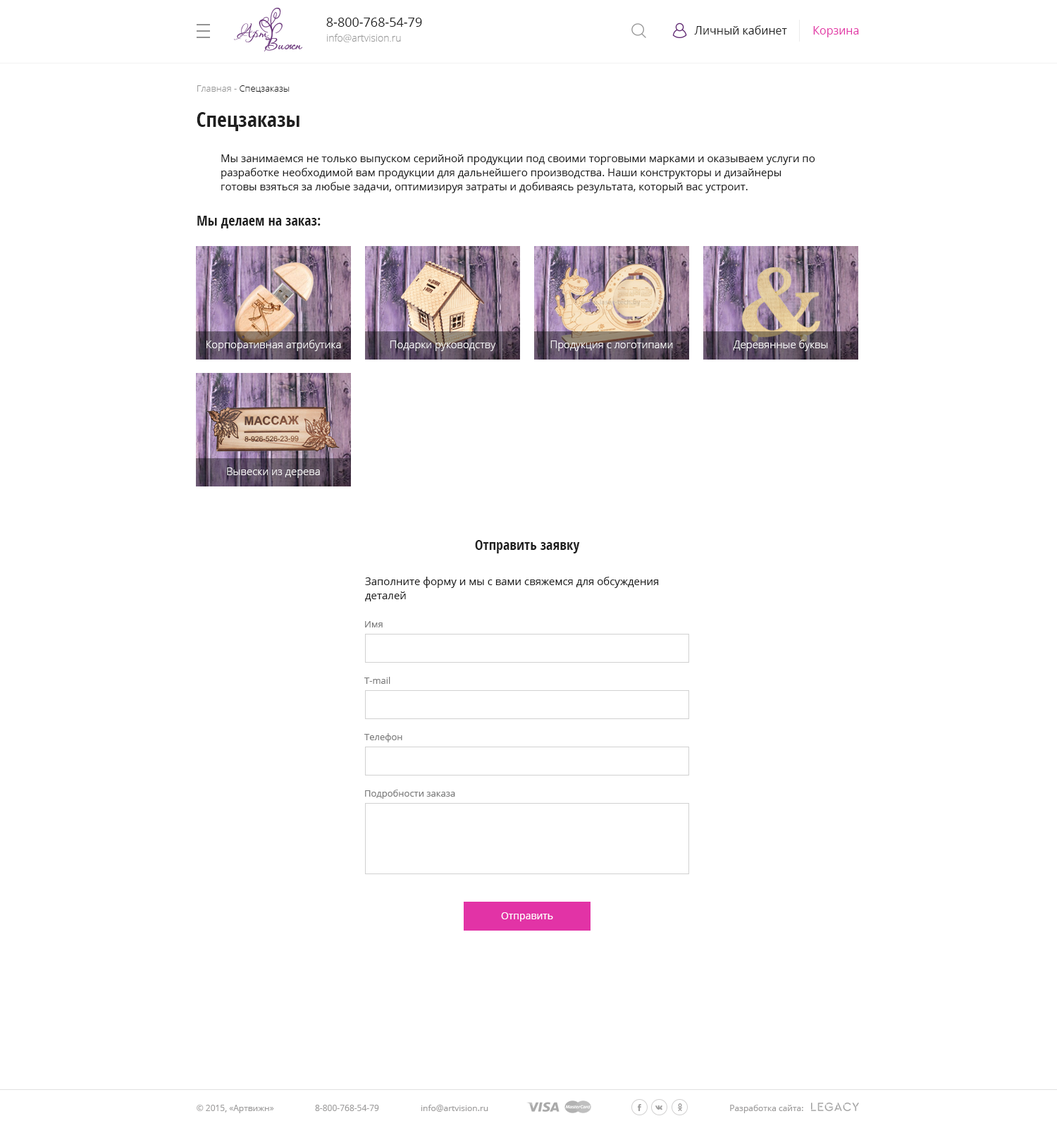
<style>
.page{position:relative;width:1057px;height:1128px;background:#ffffff}
.page>*{position:absolute;margin:0}
.t1{font:12.7px "OpenSans";color:#202020}
.t2{font:11.3px "OpenSans";color:#202020}
.t3{font:11.3px "OpenSans";color:#e233a6}
.t4{font:9.9px "OpenSans-Light";color:#999999}
.t5{font:9.2px "OpenSans-Light";color:#202020}
.t6{font:9.2px "OpenSans-Light";color:#939393}
.t7{font:21.1px "OpenSans-CondensedBold";color:#202020}
.t8{font:10.6px/14.1px "OpenSans";color:#202020}
.t9{font:14.1px "OpenSans-CondensedBold";color:#202020}
.t10{font:10.6px "OpenSans-Light";color:#ffffff}
.t11{font:9.2px "OpenSans";color:#7a7a7a}
.t12{font:9.9px "OpenSans";color:#ffffff}
.t13{font:8.5px "OpenSans";color:#9e9d9d}
</style>
<div class="page">
<p class="t1" style="left:326px;top:18px;width:96px;height:9px">8-800-768-54-79</p>
<p class="t2" style="left:694px;top:25px;width:93px;height:10px">Личный кабинет</p>
<p class="t3" style="left:813px;top:26px;width:46px;height:11px">Корзина</p>
<p class="t4" style="left:327px;top:34px;width:74px;height:8px">info@artvision.ru</p>
<p class="t5" style="left:197px;top:85px;width:93px;height:8px"><span class="t6">Главная - </span>Спецзаказы</p>
<p class="t7" style="left:197px;top:112px;width:103px;height:19px">Спецзаказы</p>
<p class="t8" style="left:221px;top:154px;width:595px;height:39px">Мы занимаемся не только выпуском серийной продукции под своими торговыми марками и оказываем услуги по разработке необходимой вам продукции для дальнейшего производства. Наши конструкторы и дизайнеры готовы взяться за любые задачи, оптимизируя затраты и добиваясь результата, который вас устроит.</p>
<p class="t9" style="left:197px;top:216px;width:124px;height:12px">Мы делаем на заказ:</p>
<p class="t10" style="left:207px;top:340px;width:134px;height:11px">Корпоративная атрибутика</p>
<p class="t10" style="left:391px;top:340px;width:105px;height:11px">Подарки руководству</p>
<p class="t10" style="left:551px;top:340px;width:122px;height:11px">Продукция с логотипами</p>
<p class="t10" style="left:733px;top:340px;width:95px;height:11px">Деревянные буквы</p>
<p class="t10" style="left:227px;top:467px;width:93px;height:11px">Вывески из дерева</p>
<p class="t9" style="left:475px;top:540px;width:105px;height:13px">Отправить заявку</p>
<p class="t8" style="left:365px;top:577px;width:294px;height:24px">Заполните форму и мы с вами свяжемся для обсуждения <br>деталей</p>
<p class="t11" style="left:365px;top:621px;width:18px;height:6px">Имя</p>
<p class="t11" style="left:364px;top:677px;width:27px;height:7px">T-mail</p>
<p class="t11" style="left:364px;top:733px;width:38px;height:9px">Телефон</p>
<p class="t11" style="left:365px;top:789px;width:90px;height:10px">Подробности заказа</p>
<p class="t12" style="left:501px;top:912px;width:52px;height:9px">Отправить</p>
<p class="t13" style="left:197px;top:1105px;width:77px;height:8px">© 2015, «Артвижн»</p>
<p class="t13" style="left:315px;top:1105px;width:64px;height:6px">8-800-768-54-79</p>
<p class="t13" style="left:421px;top:1105px;width:67px;height:7px">info@artvision.ru</p>
<p class="t13" style="left:730px;top:1105px;width:74px;height:8px">Разработка сайта:</p>
</div>
